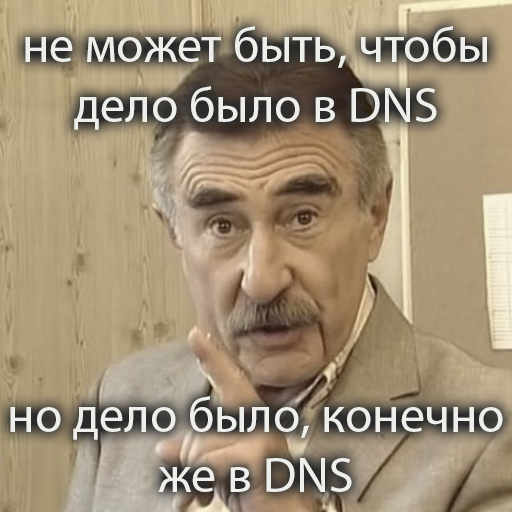
<style>
.page{position:relative;width:512px;height:512px}
.page>*{position:absolute;margin:0}
.t1{font:50px "MyriadPro-Regular";color:#eeeeeb}
</style>
<div class="page">
<p class="t1" style="left:25px;top:26px;width:462px;height:104px;text-align:center">не может быть, чтобы<br>дело было в DNS</p>
<p class="t1" style="left:10px;top:396px;width:493px;height:96px;text-align:center">но дело было, конечно<br>же в DNS</p>
</div>
